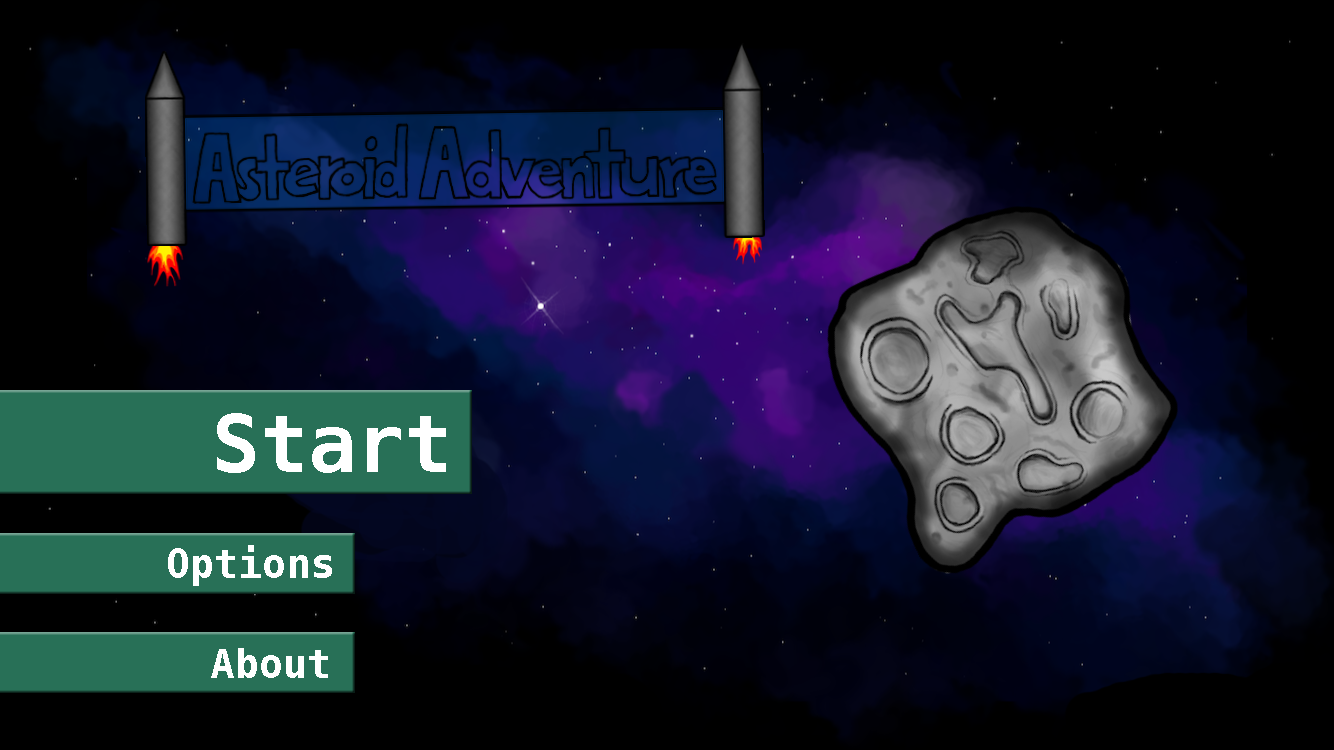
<style>
.page{position:relative;width:1334px;height:750px;background:#000000}
.page>*{position:absolute;margin:0}
.t1{font:80px "Menlo-Bold";color:#ffffff}
.t2{font:40px "Menlo-Bold";color:#ffffff}
</style>
<div class="page">
<p class="t1" style="left:217px;top:413px;width:229px;height:60px">Start</p>
<p class="t2" style="left:168px;top:545px;width:164px;height:41px">Options</p>
<p class="t2" style="left:211px;top:648px;width:117px;height:30px">About</p>
</div>
